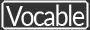
<style>
.page{position:relative;width:90px;height:30px;background:#333333}
.page>*{position:absolute;margin:0}
.t1{font:28px "Lato-Regular";letter-spacing:-0.06em;color:#ffffff;scale:0.9 1}
</style>
<div class="page">
<p class="t1" style="left:6px;top:4px;width:79px;height:22px">Vocable</p>
</div>
